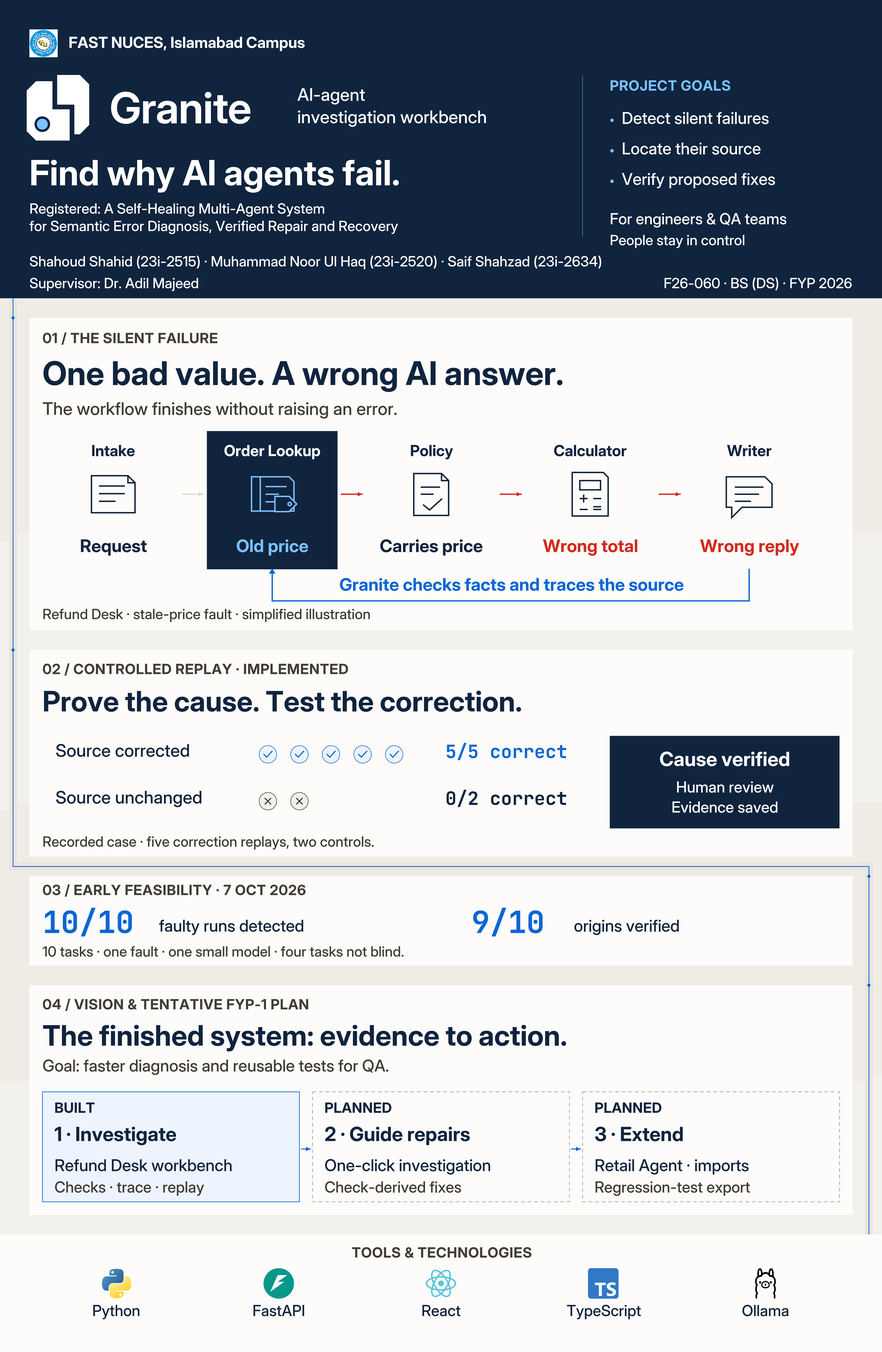
<style>
.page{position:relative;width:882px;height:1352px;background:#fdfcfa}
.page>*{position:absolute;margin:0}
.t1{font:15.2px "Inter-Bold";color:#ffffff}
.t2{font:17.4px "Inter-Medium";color:#ffffff}
.t3{font:14.2px "Inter-Bold";letter-spacing:0.031em;color:#7cc0ff}
.t4{font:16.3px "Inter-Medium";color:#ffffff}
.t5{font:34.8px "Inter-Bold";color:#ffffff}
.t6{font:14.2px "Inter-Medium";color:#ffffff}
.t7{font:15.2px "Inter-Medium";color:#ffffff}
.t8{font:14.2px "Inter-Bold";letter-spacing:0.031em;color:#403c36}
.t9{font:32.7px "Inter-Bold";color:#10243e}
.t10{font:17.4px "Inter-Medium";color:#403c36}
.t11{font:15.2px "Inter-Bold";color:#10243e}
.t12{font:17.4px "Inter-Bold";color:#10243e}
.t13{font:17.4px "Inter-Bold";color:#7cc0ff}
.t14{font:17.4px "Inter-Bold";color:#d12b1f}
.t15{font:17.4px "Inter-Bold";color:#0a66d6}
.t16{font:14.2px "Inter-Medium";color:#403c36}
.t17{font:28.3px "Inter-Bold";color:#10243e}
.t18{font:17.4px "Inter-Medium";color:#10243e}
.t19{font:18.5px "JetBrainsMono-Bold";color:#0a66d6}
.t20{font:19.6px "Inter-Bold";color:#ffffff}
.t21{font:18.5px "JetBrainsMono-Bold";color:#10243e}
.t22{font:30.5px "JetBrainsMono-Bold";color:#0a66d6}
.t23{font:16.3px "Inter-Medium";color:#10243e}
.t24{font:16.3px "Inter-Medium";color:#403c36}
.t25{font:14.2px "Inter-Bold";letter-spacing:0.015em;color:#10243e}
.t26{font:19.6px "Inter-Bold";color:#10243e}
.t27{font:15.2px "Inter-Medium";color:#403c36}
.t28{font:15.2px "Inter-Medium";color:#10243e}
</style>
<div class="page">
<p class="t1" style="left:68px;top:36px;width:319px;height:24px">FAST NUCES, Islamabad Campus</p>
<p class="t2" style="left:297px;top:87px;width:93px;height:28px">AI-agent</p>
<p class="t3" style="left:609px;top:79px;width:164px;height:23px">PROJECT GOALS</p>
<p class="t2" style="left:297px;top:109px;width:256px;height:28px">investigation workbench</p>
<p class="t4" style="left:621px;top:111px;width:201px;height:26px">Detect silent failures</p>
<p class="t4" style="left:621px;top:141px;width:190px;height:27px">Locate their source</p>
<p class="t5" style="left:29px;top:157px;width:501px;height:55px">Find why AI agents fail.</p>
<p class="t4" style="left:621px;top:172px;width:208px;height:26px">Verify proposed fixes</p>
<p class="t6" style="left:29px;top:202px;width:397px;height:23px">Registered: A Self-Healing Multi-Agent System</p>
<p class="t6" style="left:29px;top:219px;width:494px;height:24px">for Semantic Error Diagnosis, Verified Repair and Recovery</p>
<p class="t7" style="left:609px;top:212px;width:240px;height:25px">For engineers &amp; QA teams</p>
<p class="t6" style="left:609px;top:234px;width:183px;height:23px">People stay in control</p>
<p class="t6" style="left:29px;top:255px;width:770px;height:23px">Shahoud Shahid (23i-2515) · Muhammad Noor Ul Haq (23i-2520) · Saif Shahzad (23i-2634)</p>
<p class="t6" style="left:29px;top:277px;width:228px;height:23px">Supervisor: Dr. Adil Majeed</p>
<p class="t8" style="left:42px;top:332px;width:237px;height:23px">01 / THE SILENT FAILURE</p>
<p class="t9" style="left:42px;top:359px;width:701px;height:51px">One bad value. A wrong AI answer.</p>
<p class="t10" style="left:42px;top:401px;width:477px;height:28px">The workflow finishes without raising an error.</p>
<p class="t11" style="left:91px;top:444px;width:61px;height:25px">Intake</p>
<p class="t1" style="left:223px;top:444px;width:133px;height:25px">Order Lookup</p>
<p class="t11" style="left:410px;top:444px;width:59px;height:25px">Policy</p>
<p class="t11" style="left:553px;top:444px;width:101px;height:25px">Calculator</p>
<p class="t11" style="left:726px;top:444px;width:62px;height:25px">Writer</p>
<p class="t12" style="left:79px;top:538px;width:92px;height:28px">Request</p>
<p class="t13" style="left:236px;top:538px;width:99px;height:28px">Old price</p>
<p class="t12" style="left:379px;top:538px;width:141px;height:28px">Carries price</p>
<p class="t14" style="left:542px;top:538px;width:130px;height:28px">Wrong total</p>
<p class="t14" style="left:699px;top:538px;width:135px;height:28px">Wrong reply</p>
<p class="t15" style="left:339px;top:577px;width:465px;height:28px">Granite checks facts and traces the source</p>
<p class="t16" style="left:42px;top:608px;width:442px;height:23px">Refund Desk · stale-price fault · simplified illustration</p>
<p class="t8" style="left:42px;top:663px;width:412px;height:23px">02 / CONTROLLED REPLAY · IMPLEMENTED</p>
<p class="t17" style="left:42px;top:689px;width:643px;height:44px">Prove the cause. Test the correction.</p>
<p class="t18" style="left:55px;top:743px;width:183px;height:28px">Source corrected</p>
<p class="t19" style="left:445px;top:743px;width:167px;height:30px">5/5 correct</p>
<p class="t20" style="left:659px;top:750px;width:178px;height:32px">Cause verified</p>
<p class="t7" style="left:676px;top:780px;width:133px;height:25px">Human review</p>
<p class="t18" style="left:55px;top:789px;width:199px;height:29px">Source unchanged</p>
<p class="t21" style="left:445px;top:790px;width:167px;height:30px">0/2 correct</p>
<p class="t7" style="left:671px;top:800px;width:146px;height:25px">Evidence saved</p>
<p class="t16" style="left:42px;top:835px;width:446px;height:23px">Recorded case · five correction replays, two controls.</p>
<p class="t8" style="left:42px;top:884px;width:354px;height:23px">03 / EARLY FEASIBILITY · 7 OCT 2026</p>
<p class="t22" style="left:42px;top:909px;width:125px;height:47px">10/10</p>
<p class="t22" style="left:471px;top:909px;width:101px;height:47px">9/10</p>
<p class="t23" style="left:158px;top:918px;width:199px;height:27px">faulty runs detected</p>
<p class="t23" style="left:573px;top:918px;width:145px;height:27px">origins verified</p>
<p class="t16" style="left:42px;top:945px;width:488px;height:23px">10 tasks · one fault · one small model · four tasks not blind.</p>
<p class="t8" style="left:42px;top:998px;width:357px;height:23px">04 / VISION &amp; TENTATIVE FYP-1 PLAN</p>
<p class="t17" style="left:42px;top:1023px;width:709px;height:45px">The finished system: evidence to action.</p>
<p class="t24" style="left:42px;top:1058px;width:469px;height:27px">Goal: faster diagnosis and reusable tests for QA.</p>
<p class="t25" style="left:54px;top:1101px;width:55px;height:24px">BUILT</p>
<p class="t25" style="left:324px;top:1101px;width:93px;height:24px">PLANNED</p>
<p class="t25" style="left:594px;top:1101px;width:93px;height:24px">PLANNED</p>
<p class="t26" style="left:54px;top:1125px;width:166px;height:32px">1 · Investigate</p>
<p class="t26" style="left:324px;top:1125px;width:199px;height:32px">2 · Guide repairs</p>
<p class="t26" style="left:594px;top:1125px;width:123px;height:32px">3 · Extend</p>
<p class="t23" style="left:54px;top:1158px;width:241px;height:27px">Refund Desk workbench</p>
<p class="t23" style="left:324px;top:1158px;width:227px;height:27px">One-click investigation</p>
<p class="t23" style="left:594px;top:1158px;width:211px;height:27px">Retail Agent · imports</p>
<p class="t27" style="left:54px;top:1180px;width:203px;height:25px">Checks · trace · replay</p>
<p class="t27" style="left:324px;top:1180px;width:186px;height:25px">Check-derived fixes</p>
<p class="t27" style="left:594px;top:1180px;width:212px;height:25px">Regression-test export</p>
<p class="t8" style="left:351px;top:1246px;width:243px;height:23px">TOOLS &amp; TECHNOLOGIES</p>
<p class="t28" style="left:92px;top:1304px;width:67px;height:25px">Python</p>
<p class="t28" style="left:252px;top:1304px;width:73px;height:25px">FastAPI</p>
<p class="t28" style="left:421px;top:1304px;width:55px;height:25px">React</p>
<p class="t28" style="left:566px;top:1304px;width:101px;height:25px">TypeScript</p>
<p class="t28" style="left:741px;top:1304px;width:66px;height:25px">Ollama</p>
</div>
